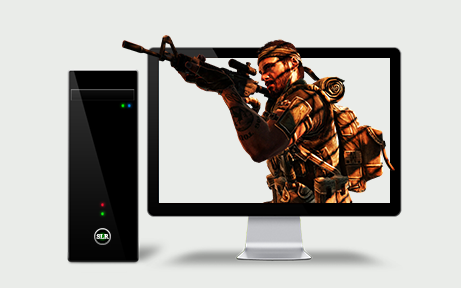
<style>
.page{position:relative;width:461px;height:288px;background:#eaece9}
.page>*{position:absolute;margin:0}
.t1{font:8px "Aparajita";letter-spacing:-0.01em;color:#ffffff;text-transform:uppercase;font-weight:bold}
</style>
<div class="page">
<p class="t1" style="left:96px;top:234px;width:13px;height:5px">slr</p>
</div>
